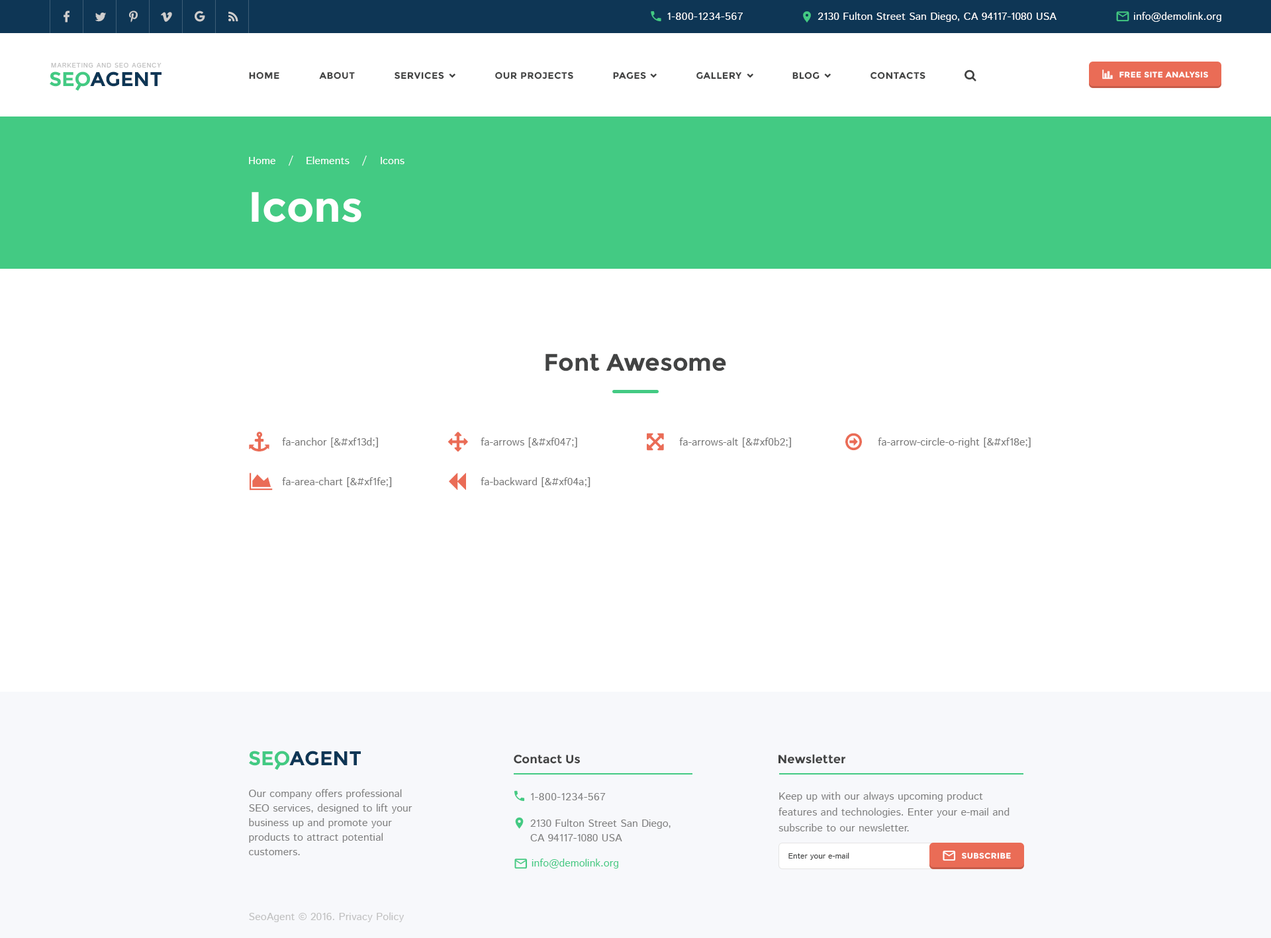
<style>
.page{position:relative;width:1271px;height:938px;background:#ffffff}
.page>*{position:absolute;margin:0}
.t1{font:10.6px "IstokWeb-Regular";letter-spacing:0.04em;color:#ffffff;text-transform:uppercase}
.t2{font:10.6px "IstokWeb-Regular";color:#ffffff}
.t3{font:6.6px "IstokWeb-Regular";letter-spacing:0.08em;color:#c1c1c1;text-transform:uppercase}
.t4{font:19.9px "Montserrat-Bold";color:#43ca83}
.t5{font:19.9px "Montserrat-Bold";color:#0e3655}
.t6{font:9.3px "Montserrat-Bold";letter-spacing:0.04em;color:#424343;text-transform:uppercase}
.t7{font:7.9px "Montserrat-Bold";letter-spacing:0.04em;color:#ffffff;text-transform:uppercase}
.t8{font:42.4px "Montserrat-Bold";color:#ffffff}
.t9{font:23.8px "Montserrat-Bold";color:#424343}
.t10{font:10.6px "IstokWeb-Regular";color:#777777}
.t11{font:11.9px "Montserrat-Bold";color:#424343}
.t12{font:10.6px/14.6px "IstokWeb-Regular";color:#7f7f7f}
.t13{font:10.6px "IstokWeb-Regular";letter-spacing:0.04em;color:#7f7f7f;text-transform:uppercase}
.t14{font:10.6px/15.9px "IstokWeb-Regular";color:#7f7f7f}
.t15{font:7.9px "IstokWeb-Regular";color:#424343}
.t16{font:10.6px "IstokWeb-Regular";color:#43ca83}
.t17{font:10.6px "IstokWeb-Regular";color:#c0c0c0}
</style>
<div class="page">
<p class="t1" style="left:667px;top:13px;width:76px;height:7px">1-800-1234-567</p>
<p class="t2" style="left:818px;top:12px;width:239px;height:10px">2130 Fulton Street San Diego, CA 94117-1080 USA</p>
<p class="t2" style="left:1134px;top:12px;width:87px;height:10px">info@demolink.org</p>
<p class="t3" style="left:51px;top:63px;width:111px;height:5px">Marketing and SEO agency</p>
<p class="t4" style="left:50px;top:71px;width:40px;height:16px">SEO</p>
<p class="t5" style="left:90px;top:71px;width:72px;height:16px">AGENT</p>
<p class="t6" style="left:249px;top:71px;width:30px;height:8px">Home</p>
<p class="t6" style="left:319px;top:71px;width:36px;height:8px">about</p>
<p class="t6" style="left:395px;top:71px;width:49px;height:8px">services</p>
<p class="t6" style="left:495px;top:71px;width:78px;height:8px">our projects</p>
<p class="t6" style="left:613px;top:71px;width:33px;height:8px">pages</p>
<p class="t6" style="left:696px;top:71px;width:46px;height:8px">gallery</p>
<p class="t6" style="left:792px;top:71px;width:28px;height:8px">blog</p>
<p class="t6" style="left:871px;top:71px;width:55px;height:8px">contacts</p>
<p class="t7" style="left:1120px;top:71px;width:88px;height:7px">Free Site Analysis</p>
<p class="t2" style="left:249px;top:157px;width:26px;height:7px">Home</p>
<p class="t2" style="left:289px;top:156px;width:4px;height:10px">/</p>
<p class="t2" style="left:307px;top:156px;width:43px;height:8px">Elements</p>
<p class="t2" style="left:362px;top:156px;width:5px;height:10px">/</p>
<p class="t2" style="left:381px;top:157px;width:24px;height:7px">Icons</p>
<p class="t8" style="left:252px;top:192px;width:109px;height:30px">Icons</p>
<p class="t9" style="left:546px;top:354px;width:180px;height:17px">Font Awesome</p>
<p class="t10" style="left:282px;top:438px;width:96px;height:10px">fa-anchor [&amp;#xf13d;]</p>
<p class="t10" style="left:481px;top:438px;width:96px;height:10px">fa-arrows [&amp;#xf047;]</p>
<p class="t10" style="left:679px;top:438px;width:112px;height:10px">fa-arrows-alt [&amp;#xf0b2;]</p>
<p class="t10" style="left:878px;top:438px;width:153px;height:10px">fa-arrow-circle-o-right [&amp;#xf18e;]</p>
<p class="t10" style="left:282px;top:477px;width:110px;height:10px">fa-area-chart [&amp;#xf1fe;]</p>
<p class="t10" style="left:481px;top:477px;width:110px;height:10px">fa-backward [&amp;#xf04a;]</p>
<p class="t4" style="left:249px;top:751px;width:40px;height:15px">SEO</p>
<p class="t5" style="left:289px;top:751px;width:72px;height:15px">AGENT</p>
<p class="t11" style="left:514px;top:755px;width:66px;height:9px">Contact Us</p>
<p class="t11" style="left:779px;top:754px;width:66px;height:10px">Newsletter</p>
<p class="t12" style="left:249px;top:789px;width:163px;height:66px">Our company offers professional SEO services, designed to lift your business up and promote your products to attract potential customers.</p>
<p class="t13" style="left:531px;top:793px;width:75px;height:7px">1-800-1234-567</p>
<p class="t14" style="left:779px;top:792px;width:231px;height:40px">Keep up with our always upcoming product features and technologies. Enter your e-mail and subscribe to our newsletter.</p>
<p class="t12" style="left:530px;top:819px;width:141px;height:22px">2130 Fulton Street San Diego,<br>CA 94117-1080 USA</p>
<p class="t15" style="left:788px;top:853px;width:61px;height:7px">Enter your e-mail</p>
<p class="t7" style="left:962px;top:853px;width:49px;height:6px">subscribe</p>
<p class="t16" style="left:532px;top:859px;width:86px;height:10px">info@demolink.org</p>
<p class="t17" style="left:249px;top:912px;width:156px;height:10px">SeoAgent © 2016. Privacy Policy</p>
</div>
